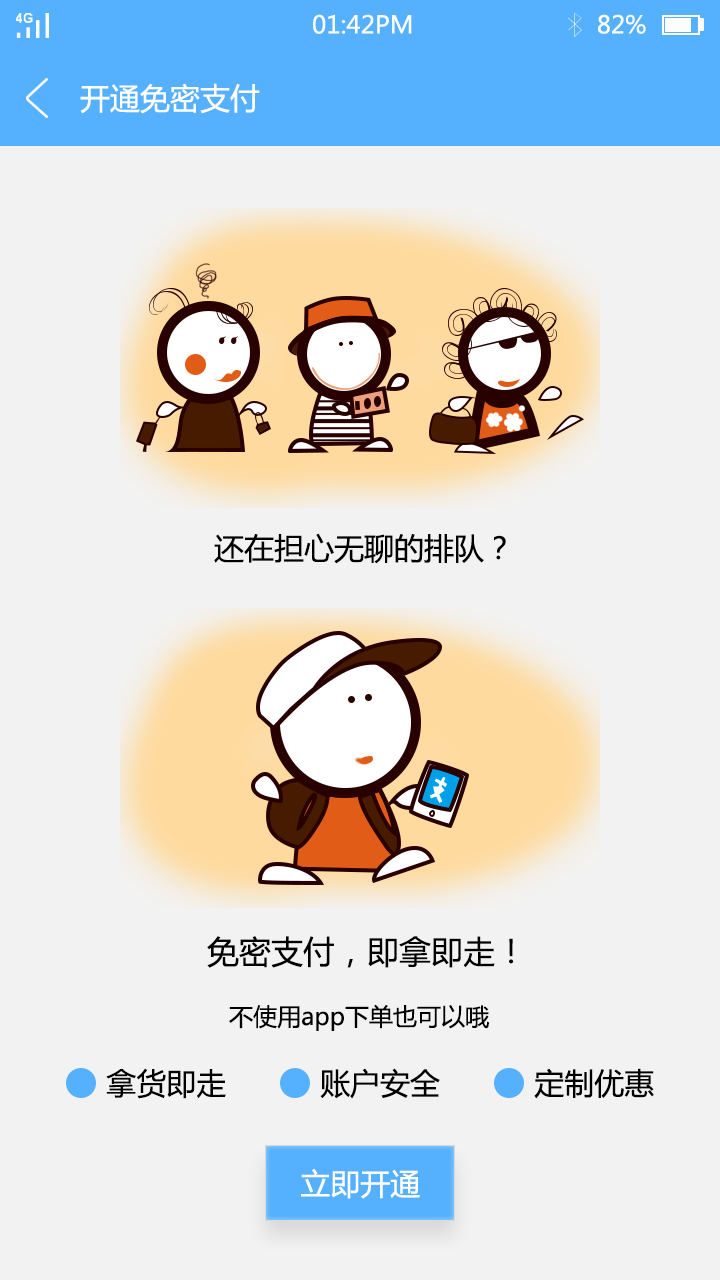
<style>
.page{position:relative;width:720px;height:1280px;background:#f2f2f2}
.page>*{position:absolute;margin:0}
.t1{font:24px "MicrosoftYaHei";color:#fbfdfc}
.t2{font:30px "MicrosoftYaHei";color:#ffffff}
.t3{font:30px "MicrosoftYaHei";color:#000000}
.t4{font:32px "MicrosoftYaHei";color:#000000}
.t5{font:24px "MicrosoftYaHei";color:#000000}
</style>
<div class="page">
<p class="t1" style="left:313px;top:14px;width:99px;height:20px">01:42PM</p>
<p class="t1" style="left:598px;top:14px;width:48px;height:20px">82%</p>
<p class="t2" style="left:80px;top:83px;width:180px;height:31px">开通免密支付</p>
<p class="t3" style="left:214px;top:533px;width:292px;height:31px">还在担心无聊的排队？</p>
<p class="t4" style="left:207px;top:936px;width:307px;height:32px">免密支付，即拿即走！</p>
<p class="t5" style="left:229px;top:1004px;width:260px;height:27px">不使用app下单也可以哦</p>
<p class="t3" style="left:106px;top:1068px;width:120px;height:31px">拿货即走</p>
<p class="t3" style="left:320px;top:1068px;width:120px;height:31px">账户安全</p>
<p class="t3" style="left:534px;top:1068px;width:120px;height:31px">定制优惠</p>
<p class="t2" style="left:301px;top:1169px;width:119px;height:30px">立即开通</p>
</div>
